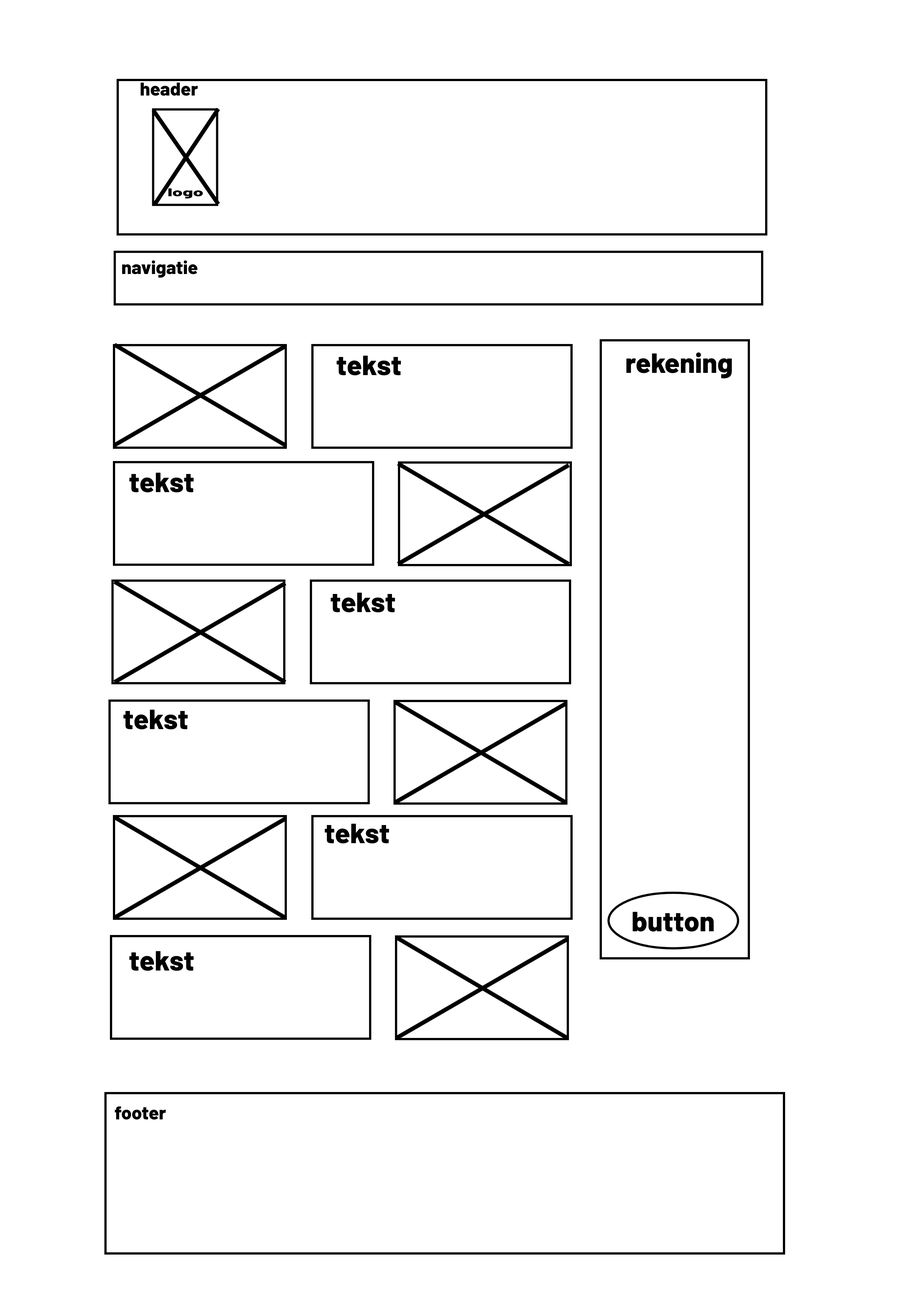
<style>
.page{position:relative;width:918px;height:1299px;background:#ffffff}
.page>*{position:absolute;margin:0}
.t1{font:18.5px "Barlow-ExtraBold";color:#000000}
.t2{font:11.2px "Barlow-ExtraBold";color:#000000;scale:1.66 1}
.t3{font:27.8px "Barlow-ExtraBold";color:#000000}
</style>
<div class="page">
<p class="t1" style="left:141px;top:83px;width:57px;height:13px">header</p>
<p class="t2" style="left:168px;top:188px;width:35px;height:10px">logo</p>
<p class="t1" style="left:122px;top:260px;width:76px;height:18px">navigatie</p>
<p class="t3" style="left:626px;top:352px;width:106px;height:26px">rekening</p>
<p class="t3" style="left:337px;top:355px;width:64px;height:20px">tekst</p>
<p class="t3" style="left:129px;top:472px;width:65px;height:20px">tekst</p>
<p class="t3" style="left:331px;top:592px;width:64px;height:20px">tekst</p>
<p class="t3" style="left:123px;top:709px;width:65px;height:20px">tekst</p>
<p class="t3" style="left:325px;top:823px;width:64px;height:20px">tekst</p>
<p class="t3" style="left:633px;top:911px;width:81px;height:20px">button</p>
<p class="t3" style="left:129px;top:951px;width:65px;height:20px">tekst</p>
<p class="t1" style="left:115px;top:1106px;width:51px;height:14px">footer</p>
</div>
